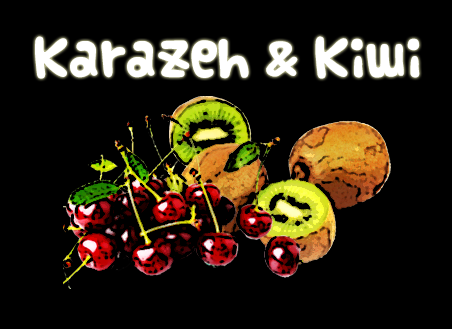
<style>
.page{position:relative;width:452px;height:329px;background:#000000}
.page>*{position:absolute;margin:0}
.t1{font:42px "Vanilla";color:#ffffff}
</style>
<div class="page">
<p class="t1" style="left:35px;top:36px;width:385px;height:43px">Karazeh &amp; Kiwi</p>
</div>
